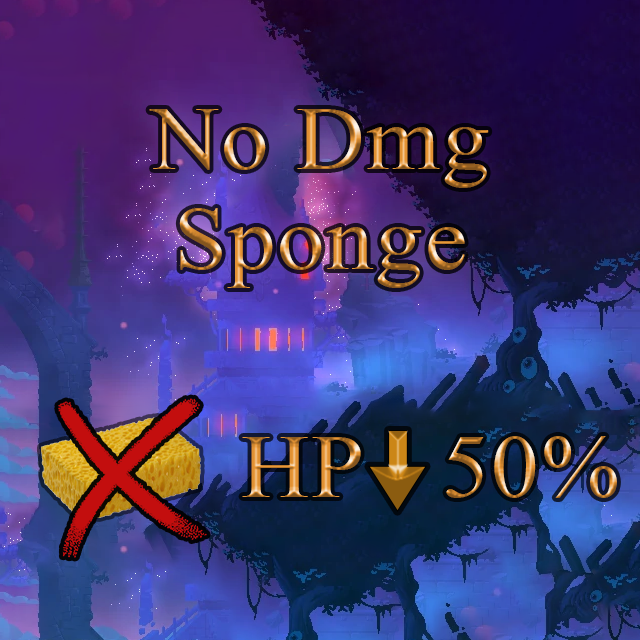
<style>
.page{position:relative;width:640px;height:640px}
.page>*{position:absolute;margin:0}
.t1{font:90px/100px "TimesNewRomanPSMT";letter-spacing:0.02em;scale:1.05 1}
.t2{font:90px "TimesNewRomanPSMT";letter-spacing:0.02em;scale:1.05 1}
</style>
<div class="page">
<p class="t1" style="left:149px;top:109px;width:340px;height:179px;text-align:center">No Dmg Sponge</p>
<p class="t2" style="left:242px;top:437px;width:119px;height:60px">HP</p>
<p class="t2" style="left:446px;top:436px;width:171px;height:62px">50%</p>
</div>
